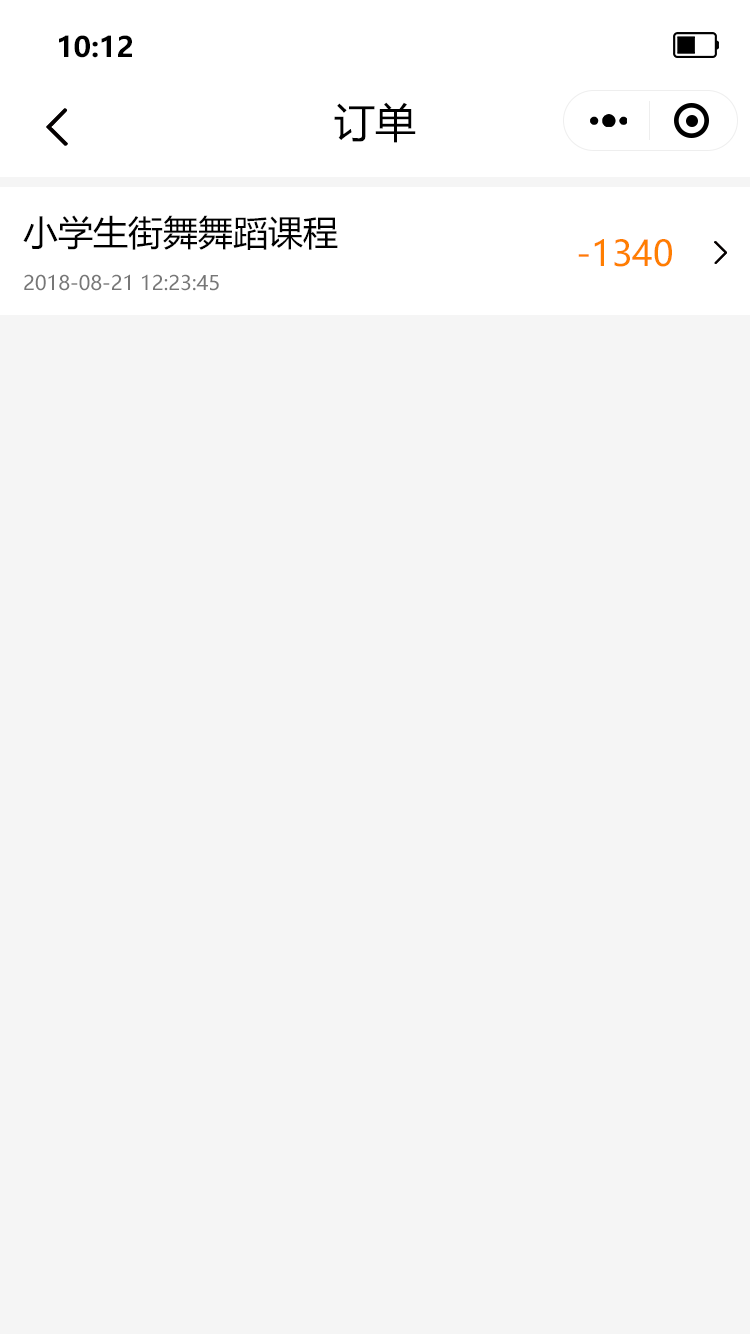
<style>
.page{position:relative;width:750px;height:1334px;background:#f5f5f5}
.page>*{position:absolute;margin:0}
.t1{font:28.1px "MicrosoftYaHei-Bold";color:#000000}
.t2{font:41px "MicrosoftYaHei";color:#000000}
.t3{font:35px "MicrosoftYaHei";color:#000000}
.t4{font:35px "MicrosoftYaHei";color:#ff7e00}
.t5{font:20px "MicrosoftYaHei";color:#777777}
</style>
<div class="page">
<p class="t1" style="left:59px;top:35px;width:73px;height:23px">10:12</p>
<p class="t2" style="left:334px;top:102px;width:82px;height:41px">订单</p>
<p class="t3" style="left:23px;top:215px;width:315px;height:35px">小学生街舞舞蹈课程</p>
<p class="t4" style="left:578px;top:239px;width:94px;height:28px">-1340</p>
<p class="t5" style="left:24px;top:274px;width:195px;height:17px">2018-08-21 12:23:45</p>
</div>
